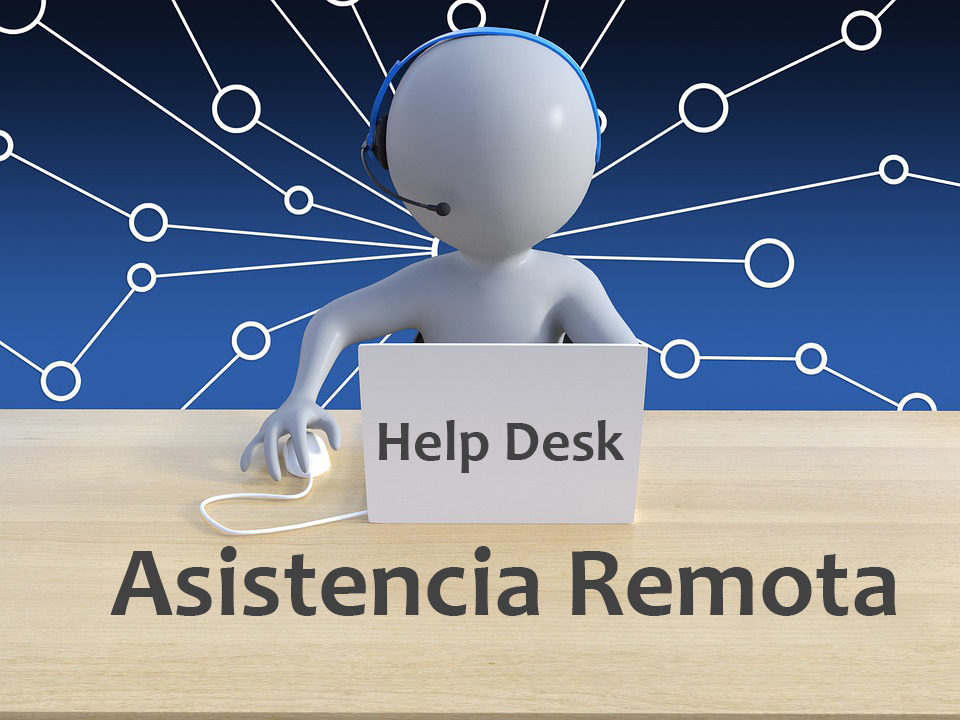
<style>
.page{position:relative;width:960px;height:720px}
.page>*{position:absolute;margin:0}
.t1{font:58.3px "Candara-Bold";color:#424242}
.t2{font:100px "Candara-Bold";color:#424242}
</style>
<div class="page">
<p class="t1" style="left:379px;top:420px;width:246px;height:53px">Help Desk</p>
<p class="t2" style="left:110px;top:546px;width:787px;height:70px">Asistencia Remota</p>
</div>
